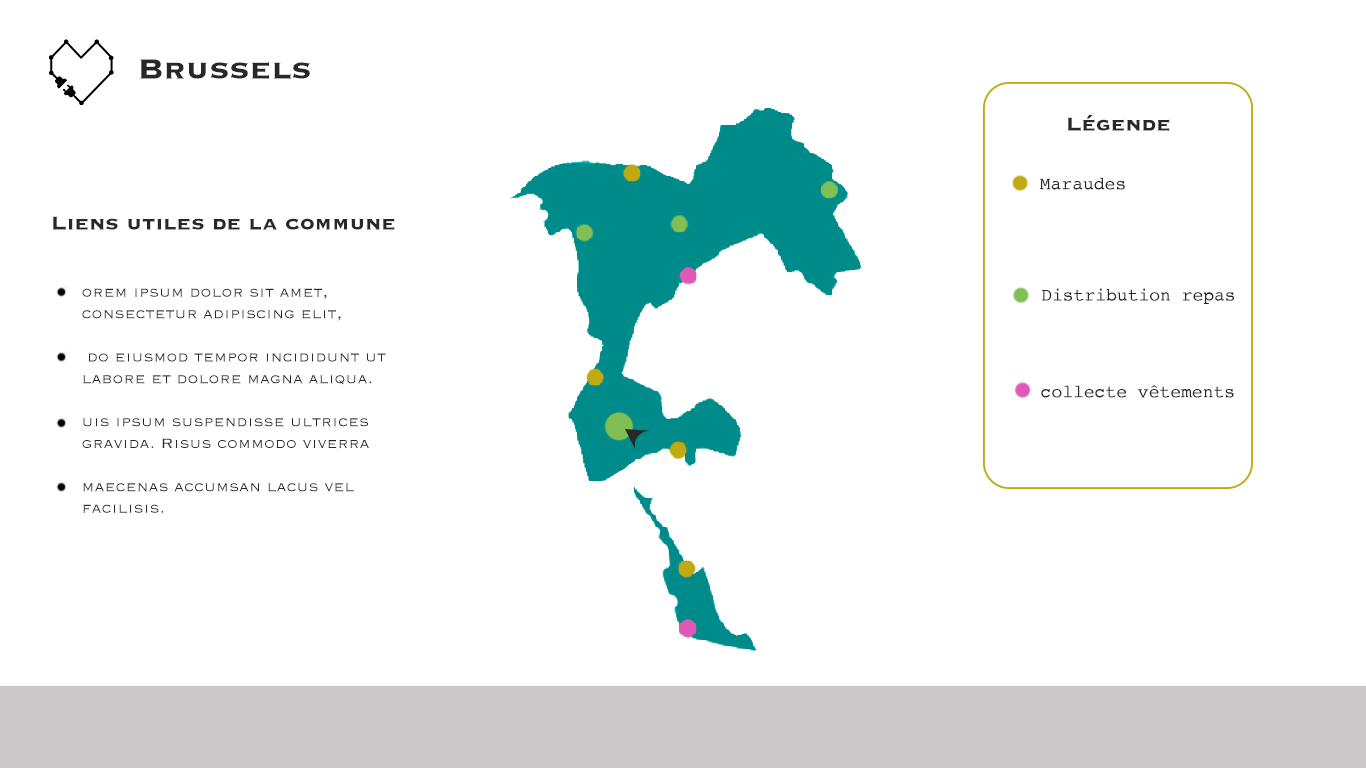
<style>
.page{position:relative;width:1366px;height:768px;background:#ffffff}
.page>*{position:absolute;margin:0}
.t1{font:36px "Copperplate-Bold";color:#282828}
.t2{font:24px "Copperplate-Bold";color:#282828}
.t3{font:18px "Courier";color:#282828}
.t4{font:18px "Copperplate-Light";color:#282828}
</style>
<div class="page">
<p class="t1" style="left:140px;top:59px;width:170px;height:21px">Brussels</p>
<p class="t2" style="left:1067px;top:115px;width:103px;height:16px">Légende</p>
<p class="t3" style="left:1039px;top:177px;width:86px;height:13px">Maraudes</p>
<p class="t2" style="left:52px;top:216px;width:343px;height:14px">Liens utiles de la commune</p>
<p class="t4" style="left:82px;top:288px;width:304px;height:225px">orem ipsum dolor sit amet, consectetur adipiscing elit,<br><br> do eiusmod tempor incididunt ut labore et dolore magna aliqua.<br><br>uis ipsum suspendisse ultrices gravida. Risus commodo viverra <br><br>maecenas accumsan lacus vel facilisis.</p>
<p class="t3" style="left:1042px;top:288px;width:192px;height:16px">Distribution repas</p>
<p class="t3" style="left:1041px;top:385px;width:193px;height:13px">collecte vêtements</p>
</div>
